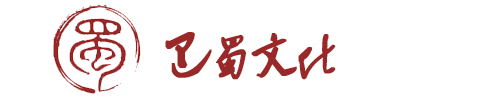
<style>
.page{position:relative;width:500px;height:102px;background:#ffffff}
.page>*{position:absolute;margin:0}
.t1{font:48px "²ÝÌ´Õ«Ã«Ôó¶«×ÖÌå";color:#992928;font-weight:bold;scale:0.91 1}
</style>
<div class="page">
<p class="t1" style="left:165px;top:32px;width:171px;height:48px">巴蜀文化</p>
</div>
